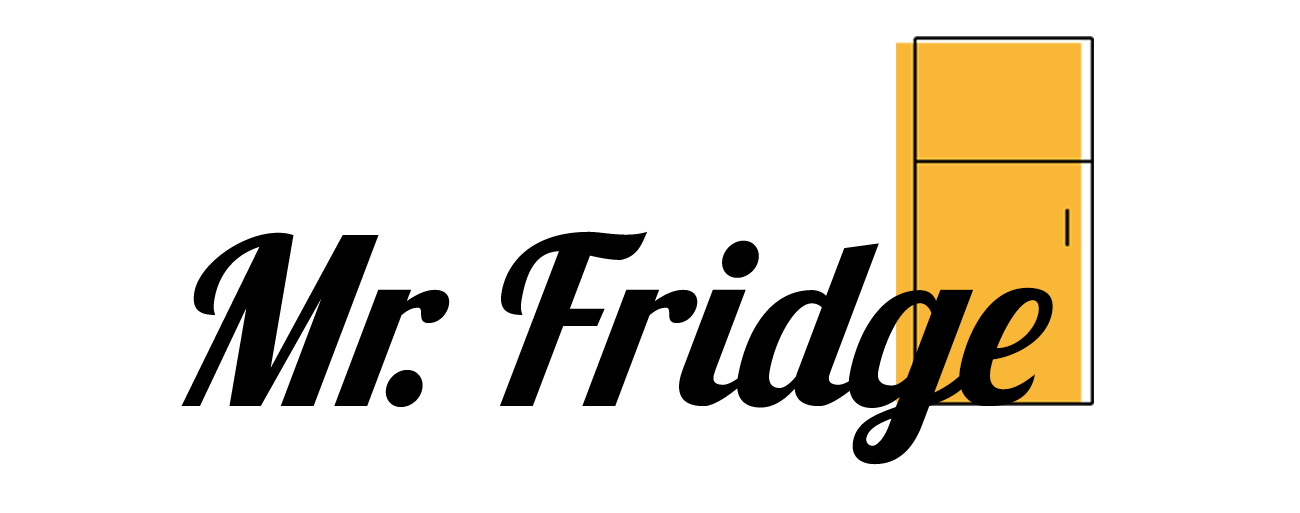
<style>
.page{position:relative;width:1300px;height:513px;background:#ffffff}
.page>*{position:absolute;margin:0}
.t1{font:232px "Lobster1.3";letter-spacing:-0.01em;color:#000000;font-style:italic}
</style>
<div class="page">
<p class="t1" style="left:181px;top:231px;width:872px;height:234px">Mr. Fridge</p>
</div>
